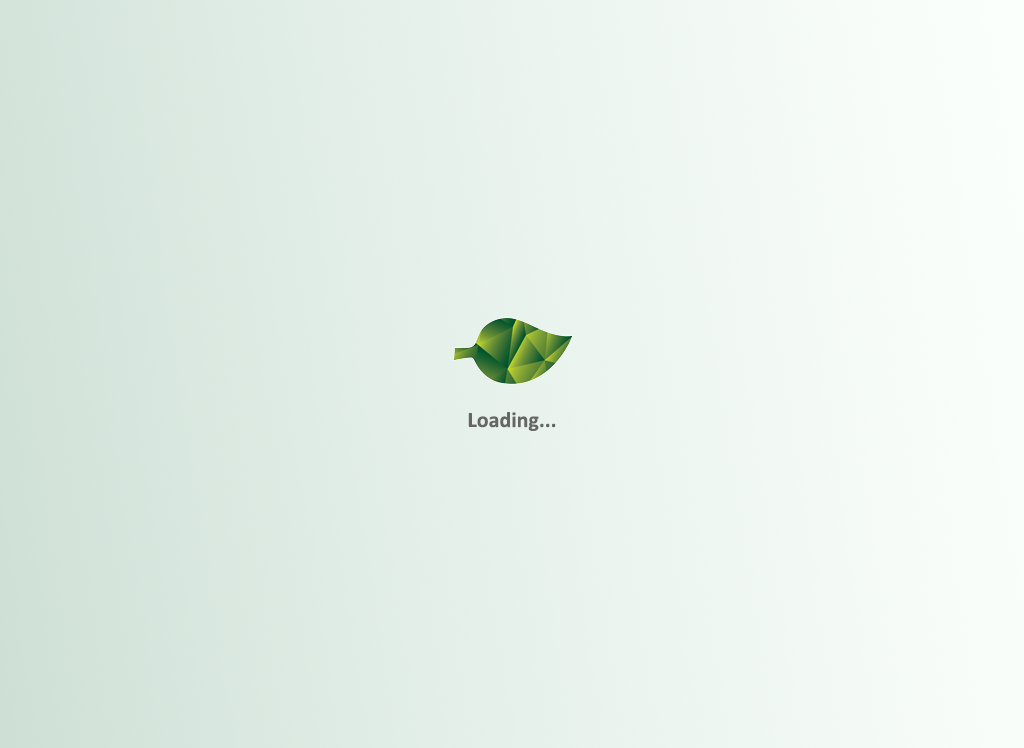
<style>
.page{position:relative;width:1024px;height:748px}
.page>*{position:absolute;margin:0}
.t1{font:22px "Calibri-Bold";color:#666666}
</style>
<div class="page">
<p class="t1" style="left:468px;top:412px;width:88px;height:19px">Loading...</p>
</div>
